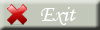
<style>
.page{position:relative;width:100px;height:30px;background:#c1c7b9}
.page>*{position:absolute;margin:0}
.t1{font:22px "MonotypeCorsiva";color:#ffffff}
</style>
<div class="page">
<p class="t1" style="left:41px;top:7px;width:35px;height:18px">Exit</p>
</div>
